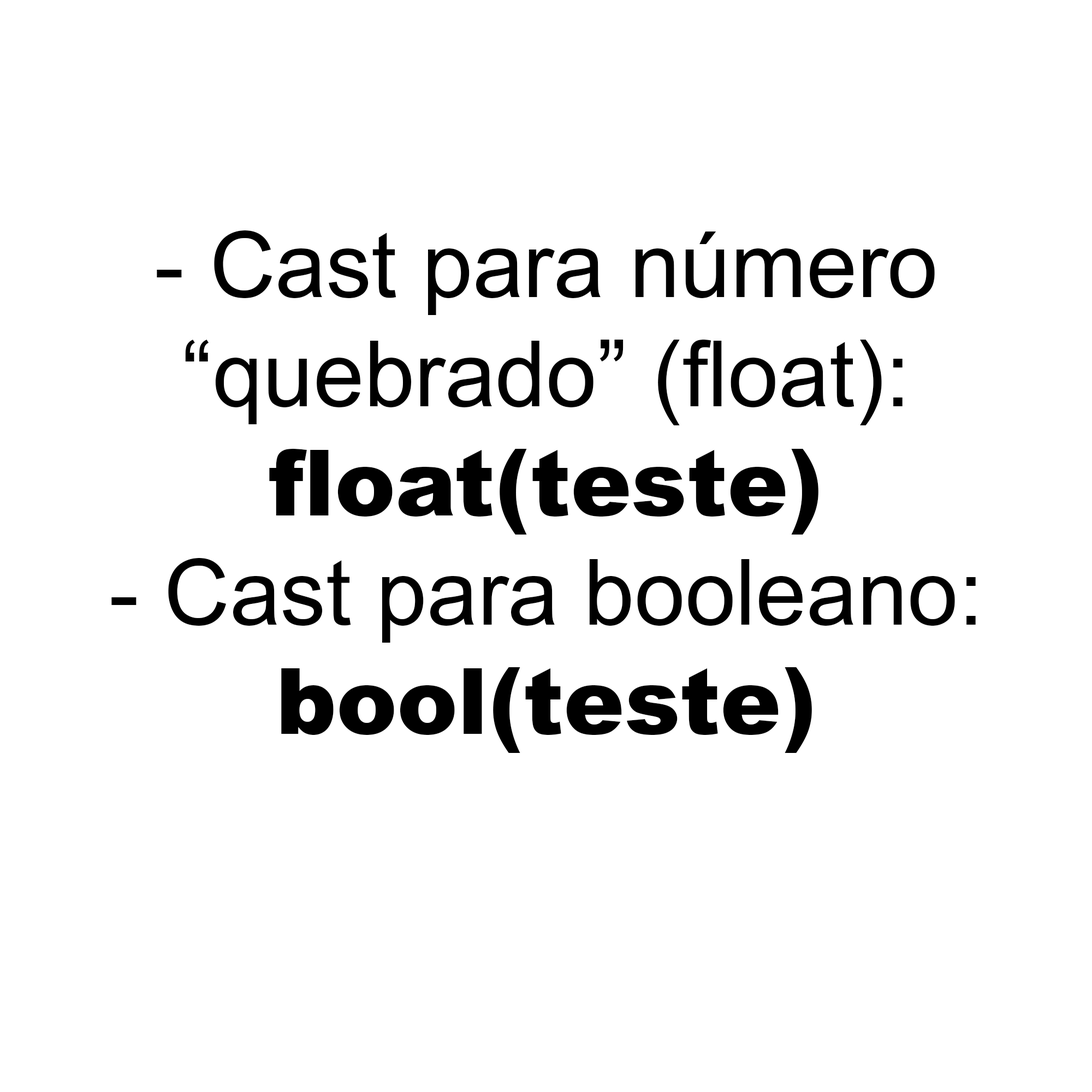
<style>
.page{position:relative;width:1092px;height:1092px;background:#ffffff}
.page>*{position:absolute;margin:0}
.t1{font:91px "ArialMT";color:#000000}
.t2{font:91px "Arial-Black";color:#000000}
</style>
<div class="page">
<p class="t1" style="left:111px;top:230px;width:865px;height:523px;text-align:center">- Cast para número<br>“quebrado” (float):<br><span class="t2">float(teste)</span><br>- Cast para booleano:<br><span class="t2">bool(teste)</span></p>
</div>
